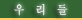
<style>
.page{position:relative;width:82px;height:20px;background:#336633}
.page>*{position:absolute;margin:0}
.t1{font:12px "BatangChe";color:#ffffff;scale:0.9 1}
</style>
<div class="page">
<p class="t1" style="left:14px;top:3px;width:54px;height:13px">우  리  들</p>
</div>
